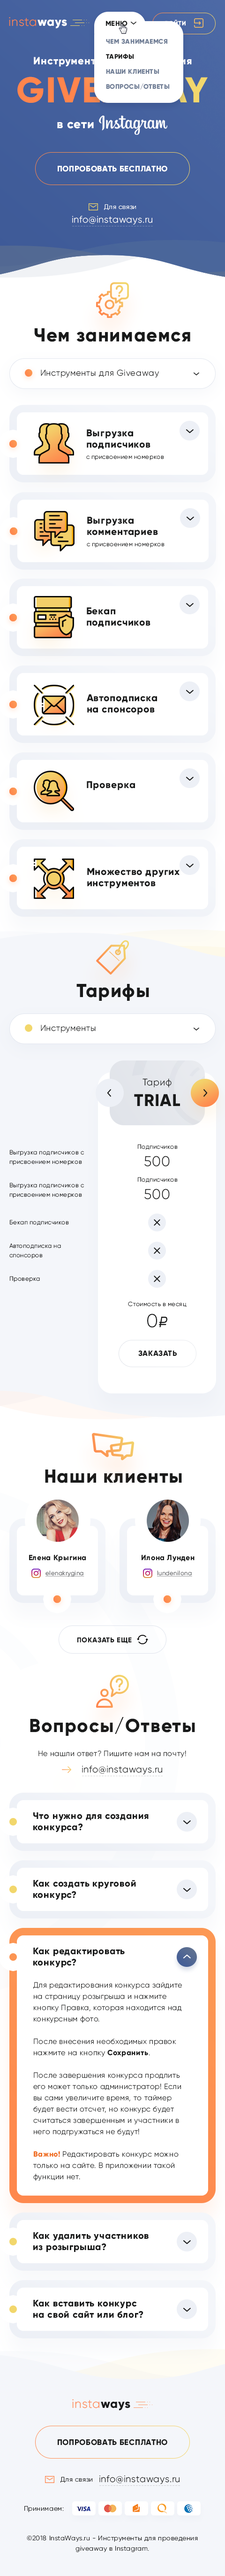
<style>
.page{position:relative;width:225px;height:2576px;background:#ffffff}
.page>*{position:absolute;margin:0}
.t1{font:12.2px "Gilroy-Light";letter-spacing:0.04em;color:#ff854c}
.t2{font:12.2px "Gilroy-ExtraBold";letter-spacing:0.04em;color:#ffffff}
.t3{font:7px "Gilroy-ExtraBold";letter-spacing:0.04em;color:#191a1a;text-transform:uppercase}
.t4{font:6.1px "Gilroy-ExtraBold";letter-spacing:0.04em;color:#ffffff;text-transform:uppercase}
.t5{font:6.6px/15px "Gilroy-ExtraBold";letter-spacing:0.04em;color:#6e7c94;text-transform:uppercase}
.t6{font:6.6px/15px "Gilroy-ExtraBold";letter-spacing:0.04em;color:#191a1a;text-transform:uppercase}
.t7{font:10.3px "Gilroy-ExtraBold";letter-spacing:0.04em;color:#ffffff}
.t8{font:35.7px "Gilroy-ExtraBold";letter-spacing:0.04em;text-transform:uppercase}
.t9{font:8px "Gilroy-ExtraBold";letter-spacing:0.04em;color:#ffffff;text-transform:uppercase}
.t10{font:6.6px "Gilroy-Light";letter-spacing:0.04em;color:#ffffff}
.t11{font:9.4px "Gilroy-Light";letter-spacing:0.04em;color:#ffffff}
.t12{font:18.8px "Gilroy-ExtraBold";letter-spacing:0.04em;color:#191a1a}
.t13{font:8.5px "Gilroy-Light";letter-spacing:0.04em;color:#191a1a}
.t14{font:6.1px/11.3px "Gilroy-Light";letter-spacing:0.04em;color:#191a1a}
.t15{font:9.9px/11.3px "Gilroy-ExtraBold";letter-spacing:0.04em;color:#191a1a}
.t16{font:9.9px "Gilroy-ExtraBold";letter-spacing:0.04em;color:#191a1a}
.t17{font:9.4px "Gilroy-Light";letter-spacing:0.04em;color:#191a1a}
.t18{font:16.9px "Gilroy-ExtraBold";letter-spacing:0.04em;color:#191a1a;text-transform:uppercase}
.t19{font:6.1px "Gilroy-Light";letter-spacing:0.04em;color:#191a1a}
.t20{font:6.1px/9.4px "Gilroy-Light";letter-spacing:0.04em;color:#191a1a}
.t21{font:6.1px/14.1px "Gilroy-Light";letter-spacing:0.04em;color:#191a1a}
.t22{font:6.1px/18.3px "Gilroy-Light";letter-spacing:0.04em;color:#191a1a}
.t23{font:14.1px "Gilroy-Light";letter-spacing:0.04em;color:#191a1a}
.t24{font:18.8px "Gilroy-Light";letter-spacing:0.04em;color:#191a1a}
.t25{font:15px "ALSRubl";letter-spacing:0.04em;color:#191a1a}
.t26{font:7.5px "Gilroy-ExtraBold";letter-spacing:0.04em;color:#191a1a;text-transform:uppercase}
.t27{font:7.5px "Gilroy-ExtraBold";letter-spacing:0.04em;color:#191a1a}
.t28{font:6.1px "Gilroy-Light";letter-spacing:0.04em;color:#57595c;text-decoration:underline}
.t29{font:7.5px "Gilroy-Light";letter-spacing:0.04em;color:#191a1a}
.t30{font:9.4px/11.3px "Gilroy-ExtraBold";letter-spacing:0.04em;color:#191a1a}
.t31{font:7.5px/11.3px "Gilroy-Light";letter-spacing:0.04em;color:#191a1a}
.t32{font:7.5px/11.3px "Gilroy-ExtraBold";letter-spacing:0.04em;color:#191a1a}
.t33{font:12.2px "Gilroy-ExtraBold";letter-spacing:0.04em;color:#191a1a}
.t34{font:8px "Gilroy-ExtraBold";letter-spacing:0.04em;color:#191a1a;text-transform:uppercase}
.t35{font:6.6px "Gilroy-Light";letter-spacing:0.04em;color:#191a1a}
.t36{font:6.6px/10.3px "Gilroy-Light";letter-spacing:0.04em;color:#191a1a}
</style>
<div class="page">
<p class="t1" style="left:9px;top:17px;width:58px;height:12px">insta<span class="t2">ways</span></p>
<p class="t3" style="left:106px;top:21px;width:22px;height:5px">Меню</p>
<p class="t3" style="left:106px;top:21px;width:22px;height:5px">Меню</p>
<p class="t4" style="left:165px;top:20px;width:21px;height:6px">Войти</p>
<p class="t5" style="left:106px;top:39px;width:64px;height:51px">Чем занимаемся<br><span class="t6">Тарифы<br></span>Наши клиенты<br>Вопросы/Ответы</p>
<p class="t7" style="left:34px;top:57px;width:158px;height:10px">Инструменты для проведения</p>
<p class="t8" style="left:17px;top:77px;width:191px;height:26px">giveaway</p>
<p class="t2" style="left:57px;top:122px;width:37px;height:7px">в сети</p>
<p class="t9" style="left:58px;top:165px;width:110px;height:7px">Попробовать бесплатно</p>
<p class="t10" style="left:104px;top:204px;width:32px;height:6px">Для связи</p>
<p class="t11" style="left:72px;top:216px;width:81px;height:9px">info@instaways.ru</p>
<p class="t12" style="left:34px;top:328px;width:157px;height:14px">Чем занимаемся</p>
<p class="t13" style="left:41px;top:370px;width:118px;height:8px">Инструменты для Giveaway</p>
<p class="t14" style="left:86px;top:429px;width:78px;height:31px"><span class="t15">Выгрузка<br>подписчиков<br></span>с присвоением номерков</p>
<p class="t14" style="left:87px;top:517px;width:78px;height:31px"><span class="t15">Выгрузка<br>комментариев<br></span>с присвоением номерков</p>
<p class="t15" style="left:87px;top:607px;width:64px;height:20px">Бекап<br>подписчиков</p>
<p class="t15" style="left:87px;top:694px;width:70px;height:21px">Автоподписка<br>на спонсоров</p>
<p class="t16" style="left:87px;top:781px;width:48px;height:9px">Проверка</p>
<p class="t15" style="left:87px;top:868px;width:93px;height:21px">Множество других<br>инструментов</p>
<p class="t12" style="left:77px;top:984px;width:72px;height:17px">Тарифы</p>
<p class="t13" style="left:41px;top:1025px;width:55px;height:8px">Инструменты</p>
<p class="t17" style="left:143px;top:1078px;width:29px;height:10px">Тариф</p>
<p class="t18" style="left:134px;top:1094px;width:46px;height:12px">trial</p>
<p class="t19" style="left:138px;top:1144px;width:40px;height:6px">Подписчиков</p>
<p class="t20" style="left:9px;top:1150px;width:75px;height:132px">Выгрузка подписчиков с присвоением номерков <br><br><span class="t21">Выгрузка подписчиков с </span>присвоением номерков<br><br><span class="t22">Бекап подписчиков<br><br></span><span class="t21">Автоподписка на</span> спонсоров<br><br><span class="t21">Проверка</span></p>
<p class="t23" style="left:145px;top:1156px;width:25px;height:11px">500</p>
<p class="t19" style="left:138px;top:1177px;width:40px;height:6px">Подписчиков</p>
<p class="t23" style="left:145px;top:1189px;width:25px;height:10px">500</p>
<p class="t19" style="left:128px;top:1301px;width:59px;height:6px">Стоимость в месяц</p>
<p class="t24" style="left:147px;top:1314px;width:21px;height:14px">0<span class="t25">b</span></p>
<p class="t26" style="left:139px;top:1350px;width:38px;height:6px">заказать</p>
<p class="t12" style="left:45px;top:1470px;width:137px;height:13px">Наши клиенты</p>
<p class="t27" style="left:29px;top:1555px;width:57px;height:7px">Елена Крыгина</p>
<p class="t27" style="left:142px;top:1555px;width:53px;height:7px">Илона Лунден</p>
<p class="t28" style="left:46px;top:1570px;width:39px;height:7px">elenakrygina</p>
<p class="t28" style="left:157px;top:1570px;width:36px;height:7px">lundenilona</p>
<p class="t3" style="left:77px;top:1637px;width:55px;height:6px">Показать еще</p>
<p class="t12" style="left:30px;top:1717px;width:165px;height:19px">Вопросы/Ответы</p>
<p class="t29" style="left:39px;top:1750px;width:147px;height:8px">Не нашли ответ? Пишите нам на почту!</p>
<p class="t17" style="left:82px;top:1765px;width:80px;height:10px">info@instaways.ru</p>
<p class="t30" style="left:33px;top:1812px;width:116px;height:20px">Что нужно для создания<br>конкурса?</p>
<p class="t30" style="left:33px;top:1880px;width:103px;height:20px">Как создать круговой<br>конкурс?</p>
<p class="t30" style="left:33px;top:1948px;width:92px;height:19px">Как редактировать<br>конкурс?</p>
<p class="t31" style="left:33px;top:1982px;width:149px;height:199px">Для редактирования конкурса зайдите на страницу розыгрыша и нажмите кнопку Правка, которая находится над конкурсным фото.<br><br>После внесения необходимых правок нажмите на кнопку <span class="t32">Сохранить</span>.<br><br>После завершения конкурса продлить его может только администратор! Если вы сами увеличите время, то таймер будет вести отсчет, но конкурс будет считаться завершенным и участники в него подгружаться не будут!<br><br><span class="t32">Важно!</span> Редактировать конкурс можно только на сайте. В приложении такой функции нет.</p>
<p class="t30" style="left:33px;top:2232px;width:116px;height:20px">Как удалить участников<br>из розыгрыша?</p>
<p class="t30" style="left:33px;top:2300px;width:111px;height:18px">Как вставить конкурс<br>на свой сайт или блог?</p>
<p class="t1" style="left:72px;top:2399px;width:59px;height:12px">insta<span class="t33">ways</span></p>
<p class="t34" style="left:58px;top:2439px;width:110px;height:6px">Попробовать бесплатно</p>
<p class="t35" style="left:61px;top:2477px;width:32px;height:6px">Для связи</p>
<p class="t17" style="left:100px;top:2475px;width:80px;height:9px">info@instaways.ru</p>
<p class="t35" style="left:24px;top:2506px;width:40px;height:6px">Принимаем:</p>
<p class="t36" style="left:27px;top:2536px;width:171px;height:16px;text-align:center">©2018 InstaWays.ru - Инструменты для проведения<br>giveaway в Instagram.</p>
</div>
